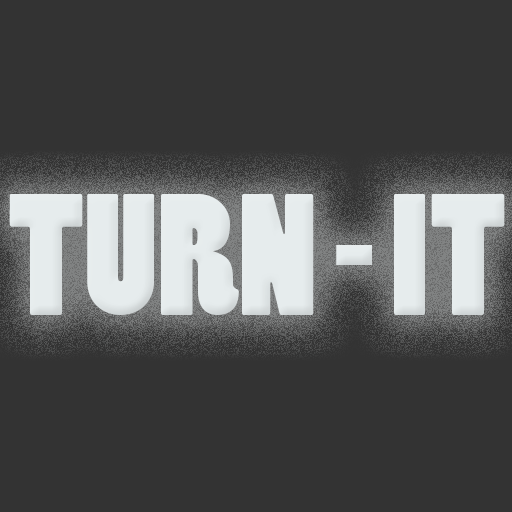
<style>
.page{position:relative;width:512px;height:512px;background:#333333}
.page>*{position:absolute;margin:0}
.t1{font:161.9px "PoplarStd";color:#e6eced}
</style>
<div class="page">
<p class="t1" style="left:9px;top:194px;width:496px;height:121px">TURN - IT</p>
</div>
